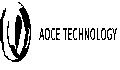
<style>
.page{position:relative;width:120px;height:70px;background:#ffffff}
.page>*{position:absolute;margin:0}
.t1{font:16px "SourceHanSansSC-Regular";letter-spacing:0.025em;color:#000000;scale:0.5 1}
</style>
<div class="page">
<p class="t1" style="left:39px;top:28px;width:78px;height:13px">AOCE TECHNOLOGY</p>
</div>
